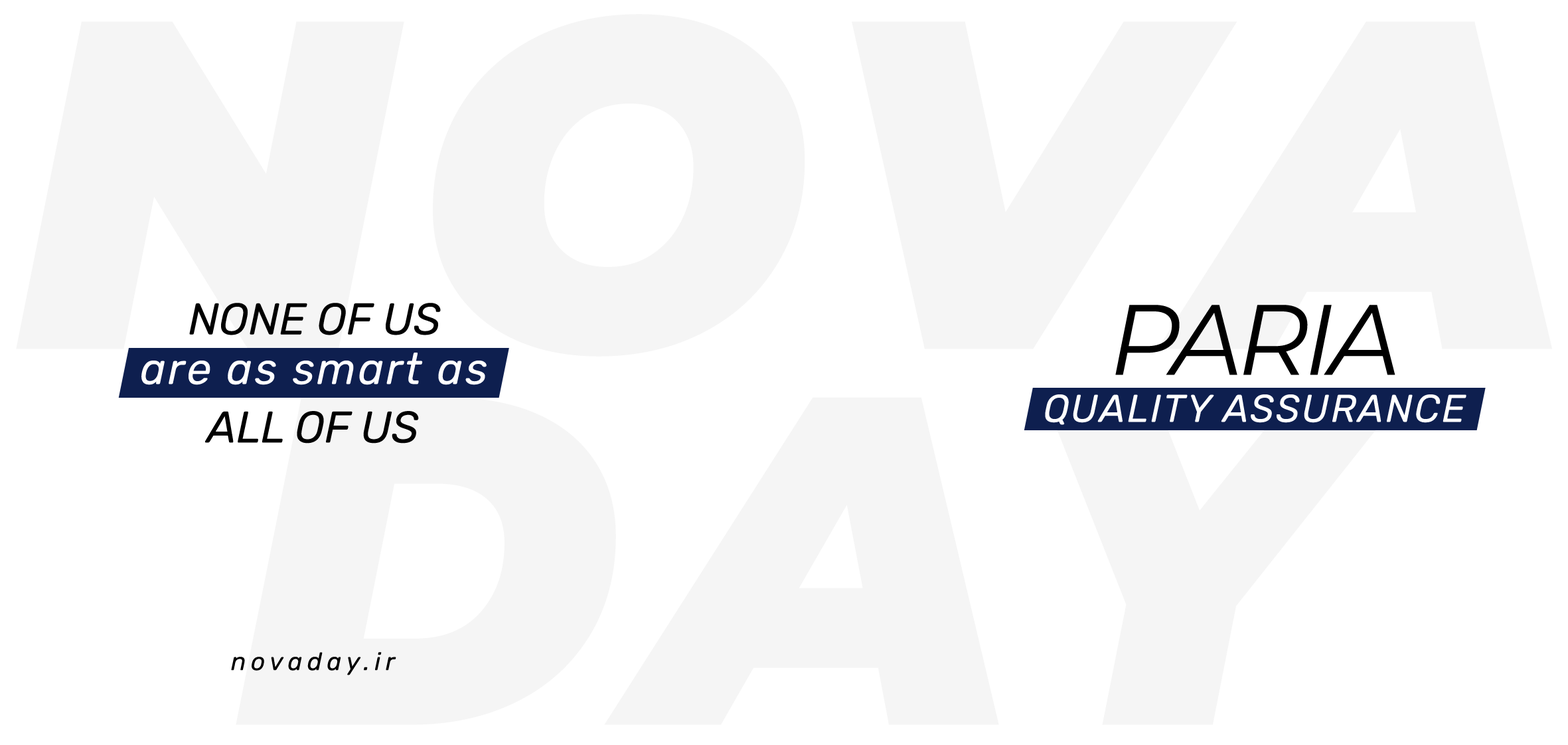
<style>
.page{position:relative;width:1568px;height:745px;background:#ffffff}
.page>*{position:absolute;margin:0}
.t1{font:44.3px "Rubik-Italic";color:#000000}
.t2{font:99.6px "Montserrat-Italic";letter-spacing:-0.05em;color:#000000}
.t3{font:44.3px "Rubik-Italic";letter-spacing:0.05em;color:#ffffff}
.t4{font:38.7px "Rubik-Italic";letter-spacing:0.05em;color:#ffffff}
.t5{font:24.9px "Rubik-Italic";letter-spacing:0.2em;color:#000000}
</style>
<div class="page">
<p class="t1" style="left:189px;top:303px;width:252px;height:32px">NONE OF US</p>
<p class="t2" style="left:1115px;top:305px;width:280px;height:70px">PARIA</p>
<p class="t3" style="left:141px;top:353px;width:346px;height:32px">are as smart as</p>
<p class="t4" style="left:1045px;top:394px;width:421px;height:31px">QUALITY ASSURANCE</p>
<p class="t1" style="left:205px;top:411px;width:214px;height:32px">ALL OF US</p>
<p class="t5" style="left:231px;top:652px;width:165px;height:23px">novaday.ir</p>
</div>
